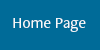
<style>
.page{position:relative;width:100px;height:50px;background:#006b98}
.page>*{position:absolute;margin:0}
.t1{font:16px "FreightNeoProBook-Regular";color:#f7fafb}
</style>
<div class="page">
<p class="t1" style="left:13px;top:18px;width:73px;height:14px">Home Page</p>
</div>
